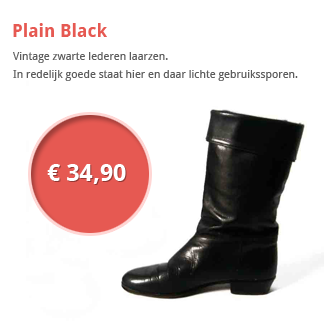
<style>
.page{position:relative;width:324px;height:324px;background:#ffffff}
.page>*{position:absolute;margin:0}
.t1{font:18px "DroidSans-Bold";color:#e65952}
.t2{font:11px/18px "DroidSans";color:#5d5d5d}
.t3{font:24px "DroidSans-Bold";color:#ffffff}
</style>
<div class="page">
<p class="t1" style="left:13px;top:23px;width:94px;height:14px">Plain Black</p>
<p class="t2" style="left:13px;top:52px;width:285px;height:29px">Vintage zwarte lederen laarzen. <br>In redelijk goede staat hier en daar lichte gebruikssporen.</p>
<p class="t3" style="left:47px;top:164px;width:79px;height:20px">€ 34,90</p>
</div>
